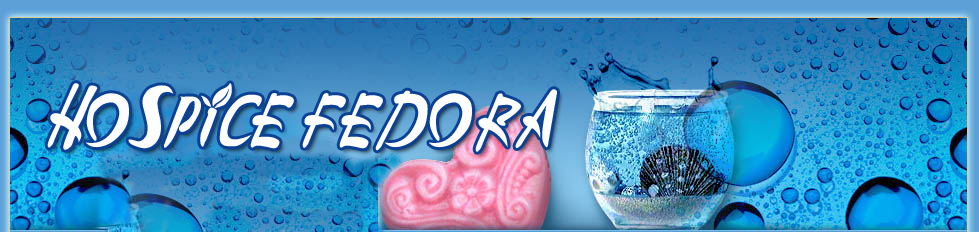
<style>
.page{position:relative;width:979px;height:232px}
.page>*{position:absolute;margin:0}
.t1{font:72px "AppleJuiced";letter-spacing:0.01em;color:#fefefe;text-transform:uppercase}
</style>
<div class="page">
<p class="t1" style="left:47px;top:83px;width:510px;height:69px">HOSPICE FEDORA</p>
</div>
